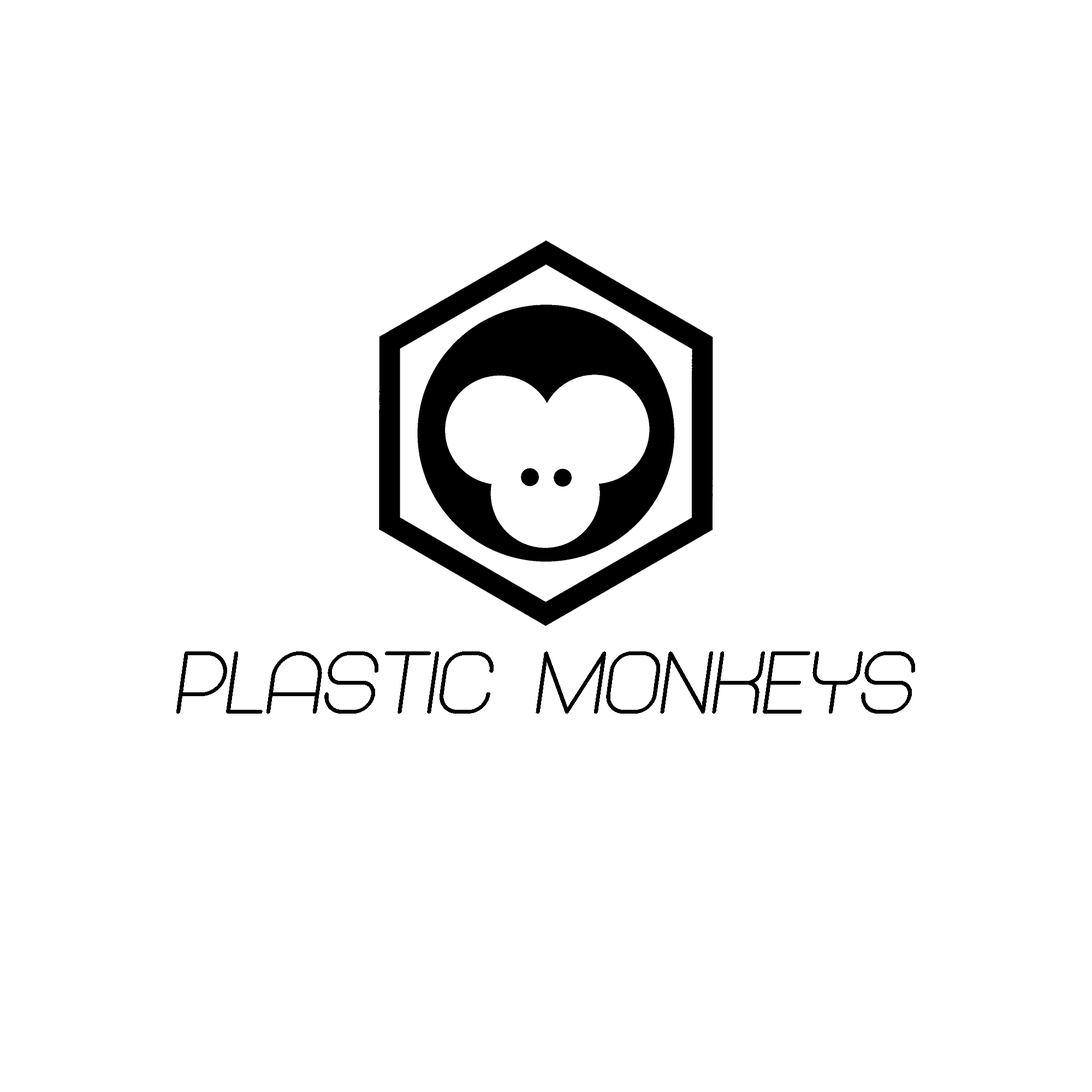
<style>
.page{position:relative;width:1092px;height:1092px;background:#ffffff}
.page>*{position:absolute;margin:0}
.t1{font:91px "Abandoned-BoldItalic";color:#000000}
</style>
<div class="page">
<p class="t1" style="left:176px;top:651px;width:739px;height:63px">Plastic Monkeys</p>
</div>
